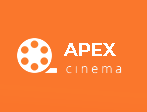
<style>
.page{position:relative;width:147px;height:112px;background:#fa772c}
.page>*{position:absolute;margin:0}
.t1{font:18px "Montserrat-Bold";color:#ffffff}
</style>
<div class="page">
<p class="t1" style="left:64px;top:43px;width:52px;height:13px">APEX</p>
</div>
